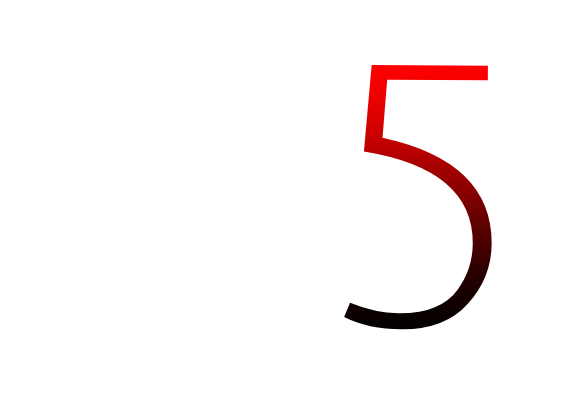
<style>
.page{position:relative;width:579px;height:396px;background:#ffffff}
.page>*{position:absolute;margin:0}
.t1{font:363.3px "JuliusSansOne-Regular"}
</style>
<div class="page">
<p class="t1" style="left:344px;top:65px;width:148px;height:265px">5</p>
</div>
